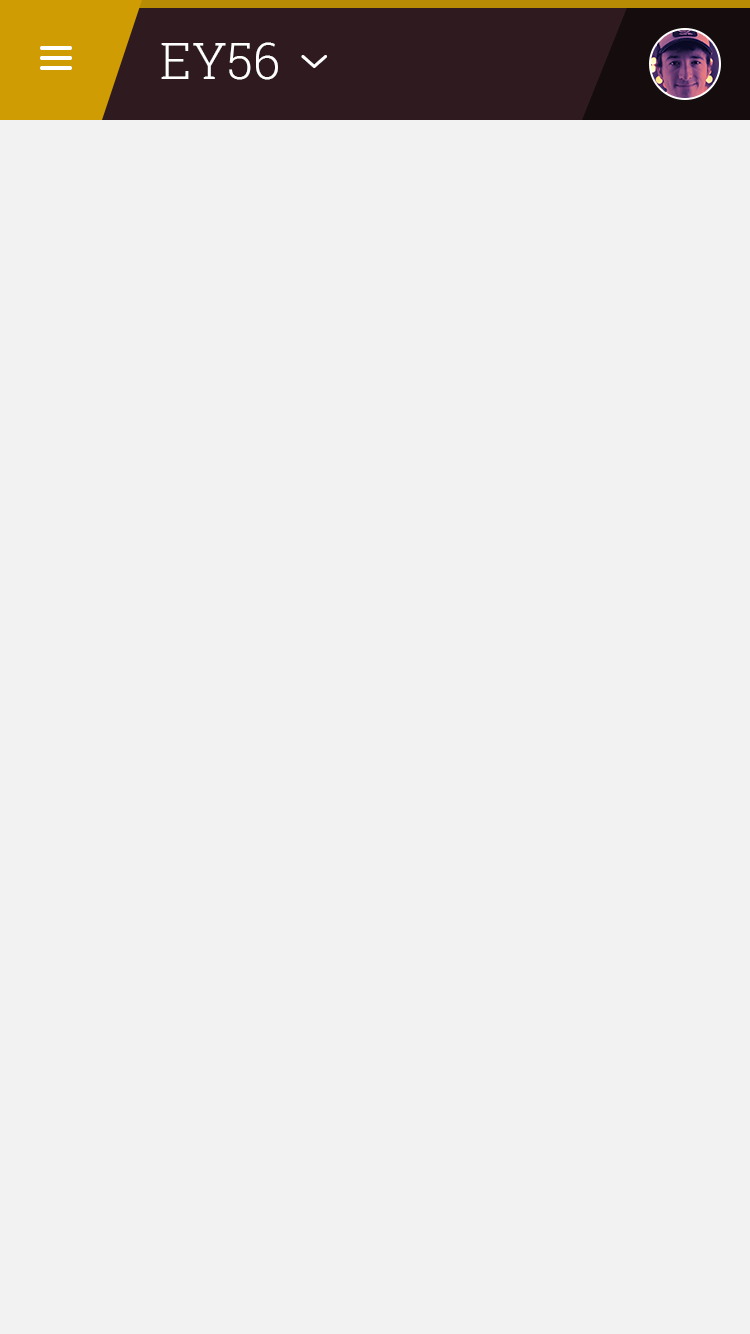
<style>
.page{position:relative;width:750px;height:1334px;background:#f2f2f2}
.page>*{position:absolute;margin:0}
.t1{font:50px "RobotoSlab-Light";color:#ffffff}
</style>
<div class="page">
<p class="t1" style="left:161px;top:42px;width:117px;height:38px">EY56</p>
</div>
